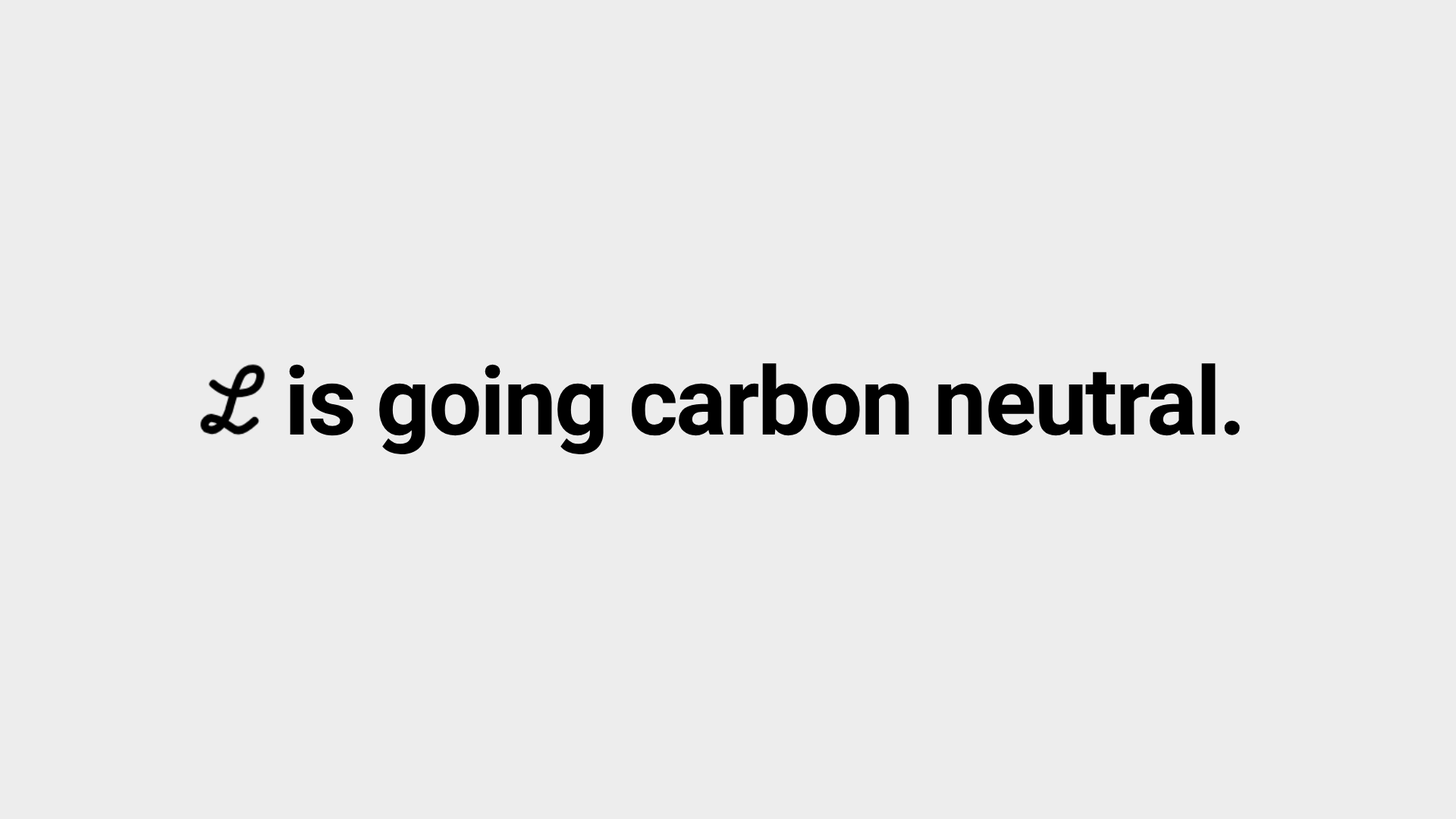
<style>
.page{position:relative;width:1456px;height:819px;background:#ededed}
.page>*{position:absolute;margin:0}
.t1{font:94.8px "Roboto-Bold";letter-spacing:-0.02em;color:#000000}
</style>
<div class="page">
<p class="t1" style="left:289px;top:363px;width:951px;height:92px">is going carbon neutral.</p>
</div>
